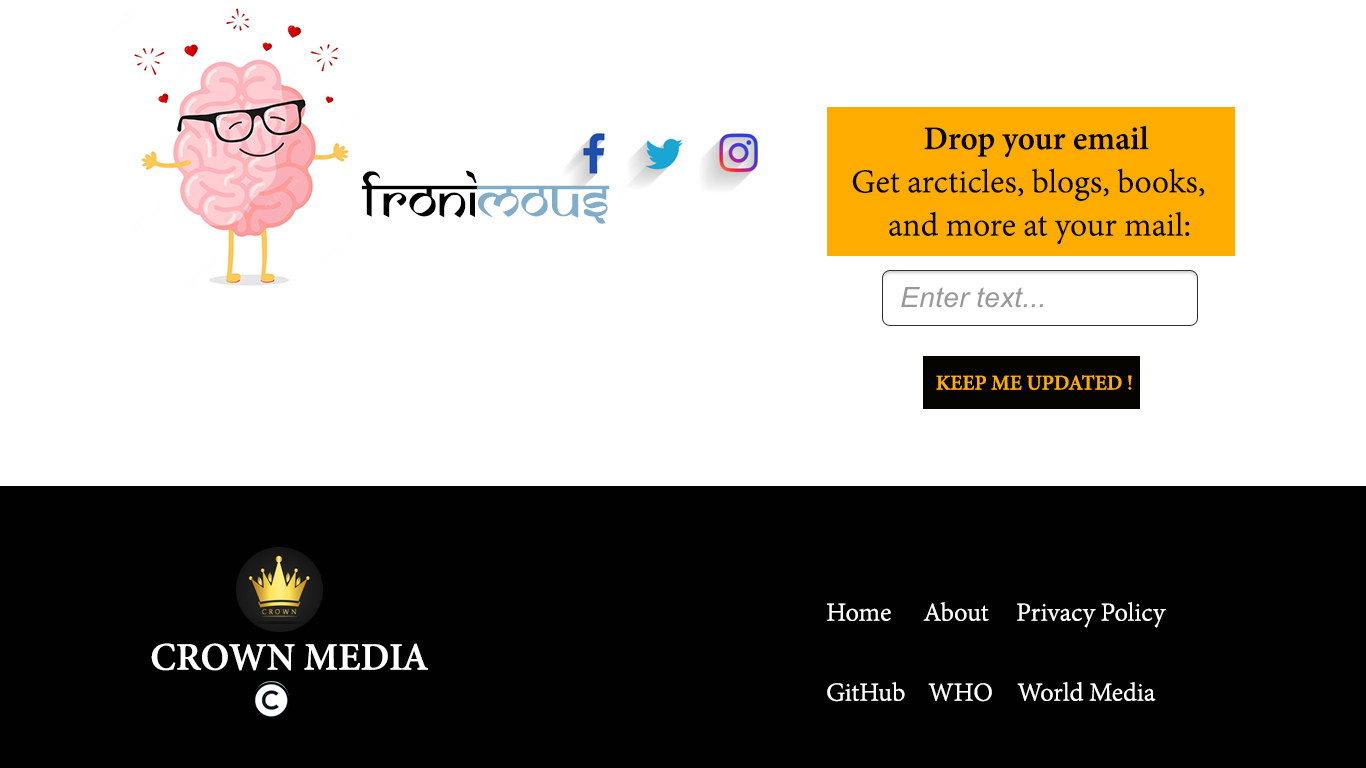
<style>
.page{position:relative;width:1366px;height:768px;background:#ffffff}
.page>*{position:absolute;margin:0}
.t1{font:36px "AdobeDevanagari-Regular";color:#070706}
.t2{font:36px "AdobeDevanagari-Bold";color:#070706}
.t3{font:57.4px "SamarkanNormal";color:#000000}
.t4{font:57.4px "SamarkanNormal";color:#82adc9}
.t5{font:22.8px "AdobeDevanagari-Bold";color:#fead00}
.t6{font:28.2px "AdobeDevanagari-Regular";color:#ffffff}
.t7{font:42.4px "AdobeDevanagari-Bold";color:#ffffff}
</style>
<div class="page">
<p class="t1" style="left:852px;top:125px;width:353px;height:120px"><span class="t2">  Drop your email<br></span>Get arcticles, blogs, books,<br>     and more at your mail:</p>
<p class="t3" style="left:362px;top:170px;width:248px;height:54px">froni<span class="t4">mous</span></p>
<p class="t5" style="left:936px;top:375px;width:196px;height:15px">KEEP ME UPDATED !</p>
<p class="t6" style="left:827px;top:603px;width:64px;height:18px">Home</p>
<p class="t6" style="left:923px;top:602px;width:66px;height:19px">About</p>
<p class="t6" style="left:1017px;top:602px;width:149px;height:26px">Privacy Policy</p>
<p class="t7" style="left:151px;top:643px;width:277px;height:28px">CROWN MEDIA</p>
<p class="t6" style="left:827px;top:682px;width:78px;height:20px">GitHub</p>
<p class="t6" style="left:928px;top:683px;width:64px;height:19px">WHO</p>
<p class="t6" style="left:1017px;top:682px;width:139px;height:19px">World Media</p>
</div>
